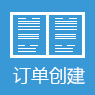
<style>
.page{position:relative;width:95px;height:95px;background:#3998d6}
.page>*{position:absolute;margin:0}
.t1{font:18px "MicrosoftYaHei";color:#ffffff}
</style>
<div class="page">
<p class="t1" style="left:13px;top:67px;width:72px;height:18px">订单创建</p>
</div>
